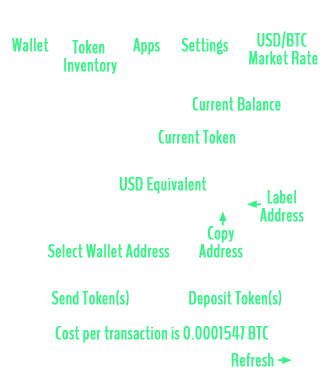
<style>
.page{position:relative;width:324px;height:378px;background:#ffffff}
.page>*{position:absolute;margin:0}
.t1{font:18px "BenchNine-Regular";color:#39f388;font-weight:bold}
.t2{font:18px/18px "BenchNine-Regular";color:#39f388;font-weight:bold}
</style>
<div class="page">
<p class="t1" style="left:12px;top:38px;width:37px;height:14px">Wallet</p>
<p class="t2" style="left:64px;top:40px;width:53px;height:34px;text-align:center">Token<br> Inventory</p>
<p class="t1" style="left:133px;top:38px;width:27px;height:17px">Apps</p>
<p class="t1" style="left:181px;top:38px;width:47px;height:17px">Settings</p>
<p class="t2" style="left:249px;top:31px;width:69px;height:34px;text-align:center">USD/BTC <br>Market Rate</p>
<p class="t1" style="left:192px;top:97px;width:89px;height:14px">Current Balance</p>
<p class="t1" style="left:158px;top:130px;width:78px;height:14px">Current Token</p>
<p class="t1" style="left:119px;top:177px;width:88px;height:17px">USD Equivalent</p>
<p class="t2" style="left:260px;top:190px;width:44px;height:32px;text-align:center">Label<br>Address</p>
<p class="t2" style="left:199px;top:226px;width:44px;height:32px;text-align:center">Copy<br>Address</p>
<p class="t1" style="left:48px;top:244px;width:122px;height:14px">Select Wallet Address</p>
<p class="t1" style="left:51px;top:290px;width:78px;height:16px">Send Token(s)</p>
<p class="t1" style="left:189px;top:290px;width:93px;height:18px">Deposit Token(s)</p>
<p class="t1" style="left:55px;top:326px;width:214px;height:17px">Cost per transaction is 0.0001547 BTC</p>
<p class="t1" style="left:231px;top:353px;width:43px;height:14px">Refresh</p>
</div>
